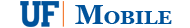
<style>
.page{position:relative;width:190px;height:28px;background:#ffffff}
.page>*{position:absolute;margin:0}
.t1{font:27.5px "Georgia-Bold";color:#00539b;font-variant:small-caps;scale:1.03 1}
</style>
<div class="page">
<p class="t1" style="left:75px;top:5px;width:97px;height:19px">Mobile</p>
</div>
